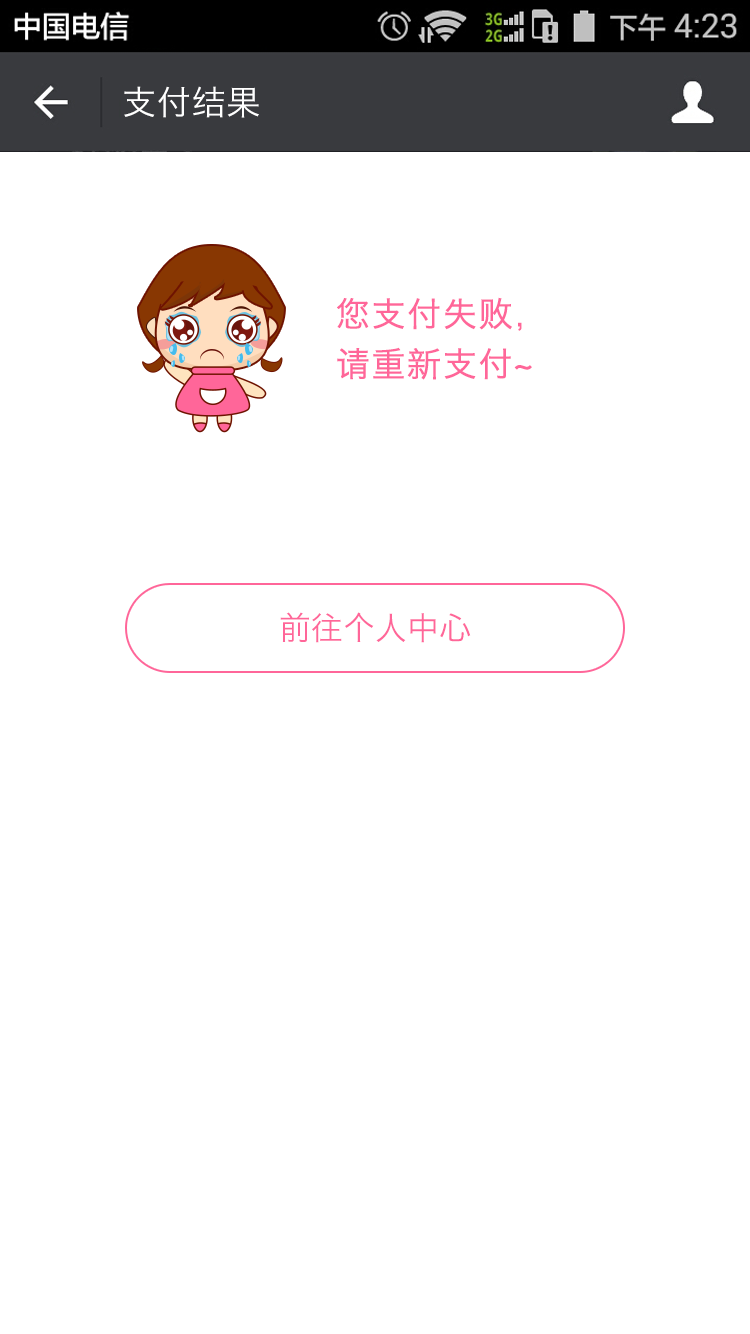
<style>
.page{position:relative;width:750px;height:1334px;background:#ffffff}
.page>*{position:absolute;margin:0}
.t1{font:34px "HiraginoSansGB-W3";letter-spacing:0.022em;color:#ffffff}
.t2{font:34px/48px "HiraginoSansGB-W3";letter-spacing:0.022em;color:#ff6699;font-weight:bold}
.t3{font:32px "HiraginoSansGB-W3";color:#ff6699}
</style>
<div class="page">
<p class="t1" style="left:124px;top:86px;width:135px;height:32px">支付结果</p>
<p class="t2" style="left:337px;top:297px;width:195px;height:83px">您支付失败，<br>请重新支付~</p>
<p class="t3" style="left:280px;top:612px;width:191px;height:31px">前往个人中心</p>
</div>
